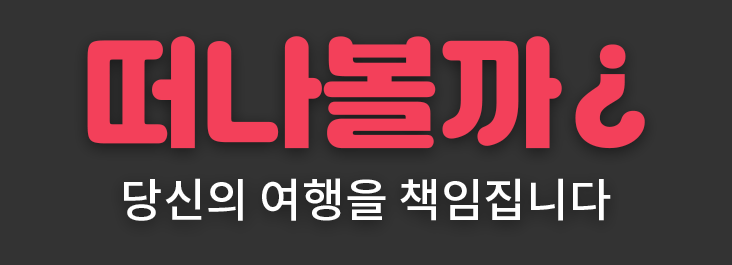
<style>
.page{position:relative;width:732px;height:265px;background:#333333}
.page>*{position:absolute;margin:0}
.t1{font:119.5px "Jalnan";color:#f3405a}
.t2{font:46.5px "NotoSansCJKkr-Medium";color:#ffffff}
</style>
<div class="page">
<p class="t1" style="left:87px;top:36px;width:475px;height:113px">떠나볼까</p>
<p class="t1" style="left:575px;top:44px;width:70px;height:105px;rotate:180deg">?</p>
<p class="t2" style="left:124px;top:178px;width:487px;height:43px">당신의 여행을 책임집니다</p>
</div>
